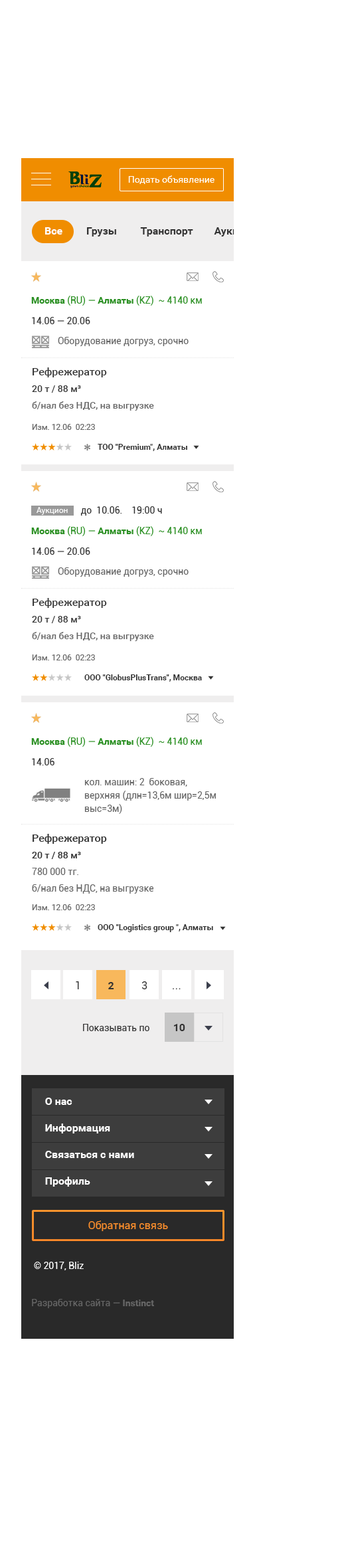
<style>
.page{position:relative;width:340px;height:1568px;background:#ffffff}
.page>*{position:absolute;margin:0}
.t1{font:10.6px "Roboto-Bold";color:#333333}
.t2{font:10.6px "Roboto-Bold";color:#ffffff}
.t3{font:9.3px/13.3px "Roboto-Regular";color:#666666}
.t4{font:9.3px/17.3px "Roboto-Bold";color:#2a8f22}
.t5{font:9.3px/17.3px "Roboto-Regular";color:#2a8f22}
.t6{font:9.3px/17.3px "Roboto-Regular";color:#333333}
.t7{font:9.3px/13.3px "Roboto-Medium";color:#666666}
.t8{font:10.6px/13.3px "Roboto-Medium";color:#333333}
.t9{font:9.3px/13.3px "Roboto-Medium";color:#333333}
.t10{font:8px "Roboto-Regular";color:#666666}
.t11{font:8px "Roboto-Bold";color:#303030}
.t12{font:8px "Roboto-Regular";color:#ffffff}
.t13{font:9.3px "Roboto-Regular";color:#333333}
</style>
<div class="page">
<p class="t1" style="left:45px;top:227px;width:220px;height:10px"><span class="t2">Все</span>         Грузы         Транспорт        Аукционы</p>
<p class="t3" style="left:31px;top:296px;width:171px;height:50px"><span class="t4">Москва</span><span class="t5"> (RU) — </span><span class="t4">Алматы</span><span class="t5"> (KZ)  ~ 4140 км<br></span><span class="t6">14.06 — 20.06<br></span>Оборудование догруз, срочно</p>
<p class="t7" style="left:32px;top:367px;width:122px;height:44px"><span class="t8">Рефрежератор<br></span><span class="t9">20 т / 88 м³<br></span>б/нал без НДС, на выгрузке</p>
<p class="t10" style="left:32px;top:424px;width:63px;height:6px">Изм. 12.06  02:23</p>
<p class="t11" style="left:98px;top:444px;width:89px;height:7px">ТОО "Premium", Алматы</p>
<p class="t12" style="left:37px;top:507px;width:31px;height:8px">Аукцион</p>
<p class="t13" style="left:80px;top:506px;width:82px;height:10px">до  10.06.    19:00 ч</p>
<p class="t3" style="left:31px;top:526px;width:171px;height:51px"><span class="t4">Москва</span><span class="t5"> (RU) — </span><span class="t4">Алматы</span><span class="t5"> (KZ)  ~ 4140 км<br></span><span class="t6">14.06 — 20.06<br></span>Оборудование догруз, срочно</p>
<p class="t7" style="left:32px;top:598px;width:122px;height:43px"><span class="t8">Рефрежератор<br></span><span class="t9">20 т / 88 м³<br></span>б/нал без НДС, на выгрузке</p>
<p class="t10" style="left:32px;top:654px;width:63px;height:6px">Изм. 12.06  02:23</p>
<p class="t11" style="left:84px;top:674px;width:118px;height:8px">ООО "GlobusPlusTrans", Москва</p>
<p class="t3" style="left:31px;top:737px;width:185px;height:77px"><span class="t4">Москва</span><span class="t5"> (RU) — </span><span class="t4">Алматы</span><span class="t5"> (KZ)  ~ 4140 км<br></span><span class="t6">14.06<br></span>кол. машин: 2  боковая, верхняя (длн=13,6м шир=2,5м выс=3м)</p>
<p class="t3" style="left:32px;top:834px;width:122px;height:60px"><span class="t8">Рефрежератор<br></span><span class="t9">20 т / 88 м³<br></span>780 000 тг. <br>б/нал без НДС, на выгрузке</p>
<p class="t10" style="left:32px;top:904px;width:63px;height:6px">Изм. 12.06  02:23</p>
<p class="t11" style="left:98px;top:924px;width:115px;height:8px">ООО "Logistics group ", Алматы</p>
</div>
